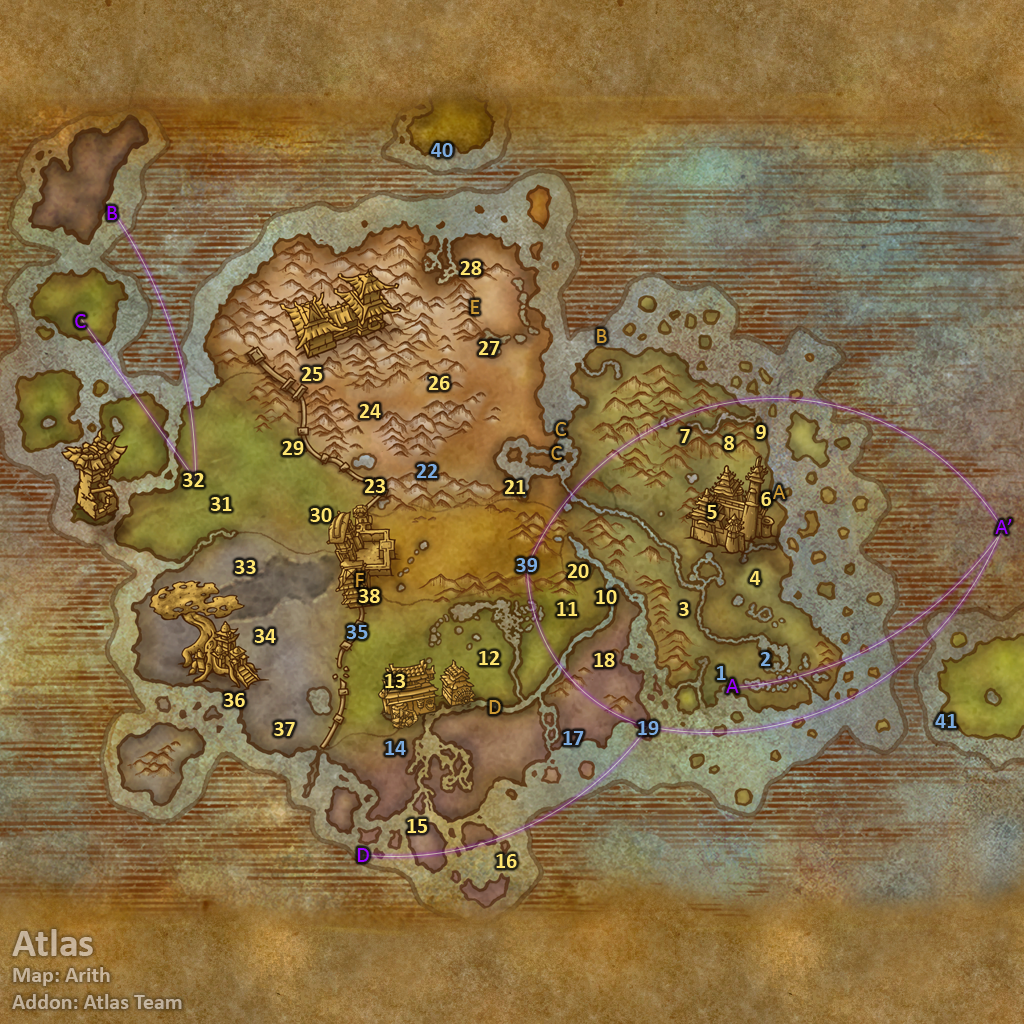
<style>
.page{position:relative;width:1024px;height:1024px}
.page>*{position:absolute;margin:0}
.t1{font:22px "Calibri-Bold";color:#7babe0}
.t2{font:22px "Calibri";color:#9900ff}
.t3{font:22px "Calibri-Bold";color:#fee570}
.t4{font:22px "Calibri";color:#cc9933}
.t5{font:22px "Calibri-Bold";color:#c4b39b}
.t6{font:40px "Calibri-Bold";color:#c4b39b}
</style>
<div class="page">
<p class="t1" style="left:431px;top:143px;width:22px;height:14px">40</p>
<p class="t2" style="left:107px;top:206px;width:11px;height:14px">B</p>
<p class="t3" style="left:460px;top:261px;width:22px;height:14px">28</p>
<p class="t4" style="left:471px;top:300px;width:9px;height:14px">E</p>
<p class="t2" style="left:75px;top:314px;width:11px;height:14px">C</p>
<p class="t4" style="left:597px;top:329px;width:10px;height:14px">B</p>
<p class="t3" style="left:479px;top:341px;width:21px;height:14px">27</p>
<p class="t3" style="left:302px;top:367px;width:21px;height:14px">25</p>
<p class="t3" style="left:429px;top:376px;width:21px;height:14px">26</p>
<p class="t3" style="left:360px;top:404px;width:21px;height:14px">24</p>
<p class="t4" style="left:555px;top:422px;width:11px;height:14px">C</p>
<p class="t3" style="left:756px;top:425px;width:10px;height:14px">9</p>
<p class="t3" style="left:680px;top:429px;width:10px;height:14px">7</p>
<p class="t3" style="left:724px;top:436px;width:10px;height:14px">8</p>
<p class="t3" style="left:282px;top:441px;width:22px;height:14px">29</p>
<p class="t4" style="left:551px;top:446px;width:11px;height:14px">C</p>
<p class="t3" style="left:183px;top:473px;width:21px;height:14px">32</p>
<p class="t1" style="left:417px;top:464px;width:21px;height:14px">22</p>
<p class="t3" style="left:365px;top:479px;width:21px;height:14px">23</p>
<p class="t3" style="left:505px;top:480px;width:21px;height:14px">21</p>
<p class="t4" style="left:773px;top:485px;width:13px;height:14px">A</p>
<p class="t3" style="left:211px;top:497px;width:21px;height:14px">31</p>
<p class="t3" style="left:761px;top:492px;width:10px;height:14px">6</p>
<p class="t3" style="left:310px;top:508px;width:22px;height:14px">30</p>
<p class="t3" style="left:707px;top:505px;width:10px;height:14px">5</p>
<p class="t2" style="left:995px;top:519px;width:17px;height:15px">A’</p>
<p class="t1" style="left:516px;top:558px;width:21px;height:14px">39</p>
<p class="t3" style="left:235px;top:560px;width:21px;height:14px">33</p>
<p class="t3" style="left:568px;top:564px;width:21px;height:14px">20</p>
<p class="t4" style="left:356px;top:573px;width:8px;height:14px">F</p>
<p class="t3" style="left:749px;top:571px;width:12px;height:14px">4</p>
<p class="t3" style="left:359px;top:589px;width:21px;height:14px">38</p>
<p class="t3" style="left:596px;top:590px;width:21px;height:14px">10</p>
<p class="t3" style="left:557px;top:602px;width:21px;height:14px">11</p>
<p class="t3" style="left:679px;top:602px;width:10px;height:14px">3</p>
<p class="t3" style="left:254px;top:629px;width:22px;height:14px">34</p>
<p class="t1" style="left:346px;top:625px;width:22px;height:14px">35</p>
<p class="t3" style="left:479px;top:651px;width:21px;height:14px">12</p>
<p class="t3" style="left:594px;top:653px;width:21px;height:14px">18</p>
<p class="t1" style="left:761px;top:652px;width:10px;height:14px">2</p>
<p class="t3" style="left:385px;top:674px;width:21px;height:14px">13</p>
<p class="t1" style="left:717px;top:666px;width:9px;height:14px">1</p>
<p class="t2" style="left:726px;top:679px;width:13px;height:14px">A</p>
<p class="t3" style="left:224px;top:693px;width:21px;height:14px">36</p>
<p class="t4" style="left:489px;top:700px;width:12px;height:14px">D</p>
<p class="t3" style="left:274px;top:722px;width:21px;height:14px">37</p>
<p class="t1" style="left:638px;top:721px;width:21px;height:14px">19</p>
<p class="t1" style="left:935px;top:714px;width:22px;height:14px">41</p>
<p class="t1" style="left:563px;top:731px;width:21px;height:14px">17</p>
<p class="t1" style="left:385px;top:741px;width:21px;height:14px">14</p>
<p class="t3" style="left:407px;top:819px;width:21px;height:14px">15</p>
<p class="t2" style="left:357px;top:848px;width:12px;height:14px">D</p>
<p class="t3" style="left:496px;top:854px;width:21px;height:14px">16</p>
<p class="t5" style="left:12px;top:929px;width:170px;height:80px"><span class="t6">Atlas<br></span>Map: Arith<br>Addon: Atlas Team</p>
</div>
